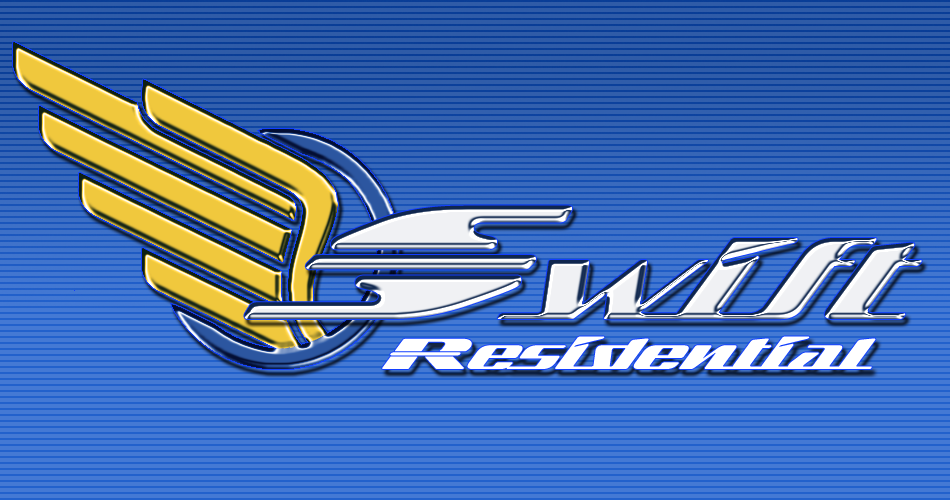
<style>
.page{position:relative;width:950px;height:500px;background:#4479d4}
.page>*{position:absolute;margin:0}
.t1{font:100px "SandovalSpeed";font-style:italic}
.t2{font:150px "SandovalSpeed";font-style:italic}
.t3{font:40px "SandovalSpeed";color:#ffffff;font-style:italic}
</style>
<div class="page">
<p class="t1" style="left:244px;top:205px;width:678px;height:115px"><span class="t2">S</span>wift</p>
<p class="t3" style="left:382px;top:336px;width:494px;height:33px">Residential</p>
</div>
